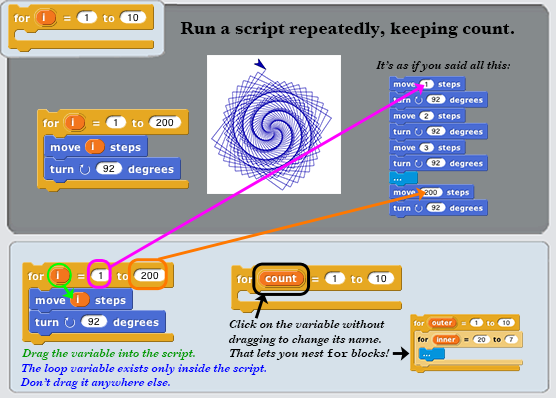
<style>
.page{position:relative;width:556px;height:398px;background:#858a8c}
.page>*{position:absolute;margin:0}
.t1{font:18px "Baskerville-Bold";color:#000000}
.t2{font:12px "Baskerville-SemiBoldItalic";color:#000000}
.t3{font:12px "CourierCE-Bold";color:#000000}
.t4{font:12px "Baskerville-SemiBoldItalic";color:#009d00}
.t5{font:12px "Baskerville-SemiBoldItalic";color:#0000ff}
</style>
<div class="page">
<p class="t1" style="left:180px;top:22px;width:334px;height:16px">Run a script repeatedly, keeping count.</p>
<p class="t2" style="left:376px;top:61px;width:134px;height:11px">It’s as if you said all this:</p>
<p class="t2" style="left:228px;top:320px;width:162px;height:40px">Click on the variable without<br>dragging to change its name.<br>That lets you nest <span class="t3">for</span> blocks!</p>
<p class="t4" style="left:22px;top:349px;width:173px;height:11px">Drag the variable into the script.</p>
<p class="t5" style="left:20px;top:364px;width:246px;height:25px">The loop variable exists only inside the script.<br>Don’t drag it anywhere else.</p>
</div>
